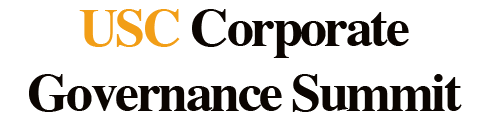
<style>
.page{position:relative;width:500px;height:125px;background:#ffffff}
.page>*{position:absolute;margin:0}
.t1{font:54.1px "Times-Bold";letter-spacing:-0.048em;color:#0b0501}
.t2{font:54.1px "Times-Bold";letter-spacing:-0.048em;color:#f29e17}
</style>
<div class="page">
<p class="t1" style="left:29px;top:9px;width:433px;height:103px;text-align:center"><span class="t2">USC </span>Corporate<br>Governance Summit</p>
</div>
